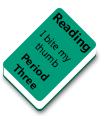
<style>
.page{position:relative;width:100px;height:116px;background:#ffffff}
.page>*{position:absolute;margin:0}
.t1{font:12.9px "LaoUI-Bold";color:#000000}
.t2{font:10.2px "LaoUI";color:#000000}
.t3{font:11.4px "LaoUI-Bold";color:#000000}
</style>
<div class="page">
<p class="t1" style="left:52px;top:12px;width:39px;height:41px;rotate:45deg">Reading</p>
<p class="t2" style="left:35px;top:30px;width:36px;height:38px;rotate:45deg">I bite my thumb</p>
<p class="t3" style="left:13px;top:53px;width:37px;height:37px;text-align:center;rotate:45deg">Period <br>Three</p>
</div>
